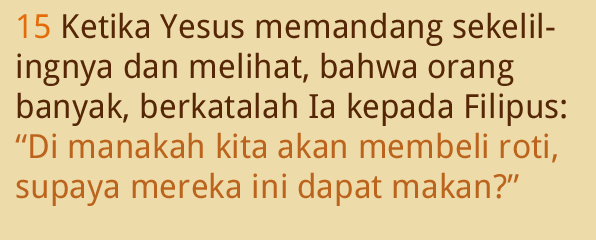
<style>
.page{position:relative;width:596px;height:240px;background:#eddca9}
.page>*{position:absolute;margin:0}
.t1{font:33.3px "DroidSans";color:#562707}
.t2{font:33.3px "DroidSans";color:#e36b09}
.t3{font:33.3px "DroidSans";color:#bc641d}
</style>
<div class="page">
<p class="t1" style="left:15px;top:12px;width:551px;height:194px"><span class="t2">15 </span>Ketika Yesus memandang sekelilingnya dan melihat, bahwa orang banyak, berkatalah Ia kepada Filipus: <span class="t3">“Di manakah kita akan membeli roti, supaya mereka ini dapat makan?”</span></p>
</div>
